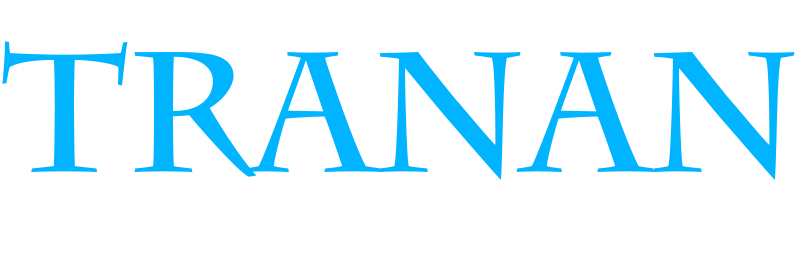
<style>
.page{position:relative;width:800px;height:255px;background:#ffffff}
.page>*{position:absolute;margin:0}
.t1{font:169px "CharlemagneStd-Bold";color:#00b4ff;text-transform:uppercase}
</style>
<div class="page">
<p class="t1" style="left:2px;top:41px;width:793px;height:139px">Tranan</p>
</div>
